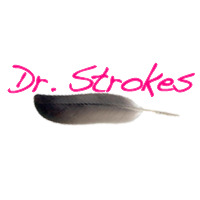
<style>
.page{position:relative;width:200px;height:200px;background:#ffffff}
.page>*{position:absolute;margin:0}
.t1{font:36.3px "Handwriting-Dakota";letter-spacing:-0.06em;color:#fe0180}
</style>
<div class="page">
<p class="t1" style="left:8px;top:63px;width:187px;height:34px">Dr. Strokes</p>
</div>
